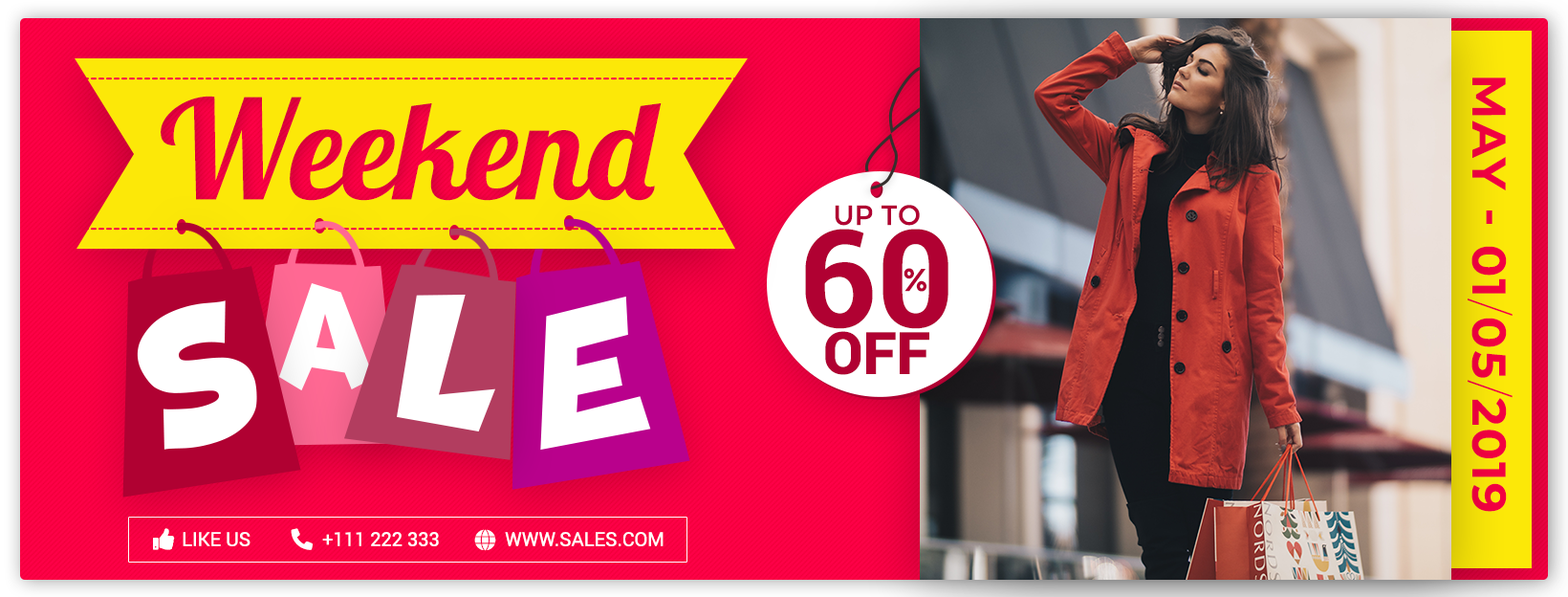
<style>
.page{position:relative;width:1568px;height:597px}
.page>*{position:absolute;margin:0}
.t1{font:47.1px "Montserrat-Bold";letter-spacing:0.05em;color:#f40041;text-transform:uppercase}
.t2{font:47.1px "Montserrat-ExtraLight";letter-spacing:0.05em;color:#f40041;text-transform:uppercase}
.t3{font:136.9px "Lobster-Regular";color:#ff0048}
.t4{font:27.7px "Montserrat-Regular";color:#b00132;text-transform:uppercase}
.t5{font:135.5px "Roboto-Bold";color:#b00132;text-transform:uppercase}
.t6{font:31.6px "Montserrat-Regular";color:#b00132;text-transform:uppercase}
.t7{font:58.4px "Roboto-Black";color:#b00132;text-transform:uppercase}
.t8{font:19.1px "Roboto-Regular";color:#ffffff;text-transform:uppercase}
</style>
<div class="page">
<p class="t1" style="left:1468px;top:77px;width:45px;height:435px;rotate:90deg">may - 01<span class="t2">/</span>05<span class="t2">/</span>2019</p>
<p class="t3" style="left:161px;top:96px;width:501px;height:105px">Weekend</p>
<p class="t4" style="left:835px;top:205px;width:85px;height:21px">Up to</p>
<p class="t5" style="left:805px;top:229px;width:143px;height:100px">60</p>
<p class="t6" style="left:904px;top:268px;width:22px;height:24px">%</p>
<p class="t7" style="left:825px;top:331px;width:104px;height:44px">OFF</p>
<p class="t8" style="left:183px;top:532px;width:67px;height:14px">Like US</p>
<p class="t8" style="left:322px;top:532px;width:117px;height:14px">+111 222 333</p>
<p class="t8" style="left:505px;top:532px;width:159px;height:14px">www.sales.com</p>
</div>
